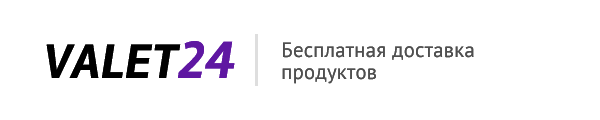
<style>
.page{position:relative;width:600px;height:120px;background:#ffffff}
.page>*{position:absolute;margin:0}
.t1{font:50px "Rambla-BoldItalic";letter-spacing:0.01em;color:#000000}
.t2{font:54.2px "Rambla-BoldItalic";letter-spacing:0.01em;color:#5f17a2}
.t3{font:20.8px/21.7px "PTSans-Regular";letter-spacing:0.01em;color:#4f4f4f}
</style>
<div class="page">
<p class="t1" style="left:46px;top:41px;width:189px;height:37px">VALET<span class="t2">24</span></p>
<p class="t3" style="left:282px;top:42px;width:192px;height:42px">Бесплатная доставка<br>продуктов</p>
</div>
